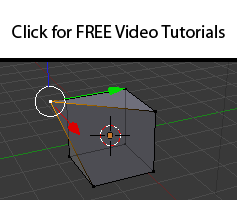
<style>
.page{position:relative;width:237px;height:200px;background:#393939}
.page>*{position:absolute;margin:0}
.t1{font:18px "MyriadPro-Regular";color:#000000}
</style>
<div class="page">
<p class="t1" style="left:12px;top:25px;width:213px;height:13px">Click for FREE Video Tutorials</p>
</div>
